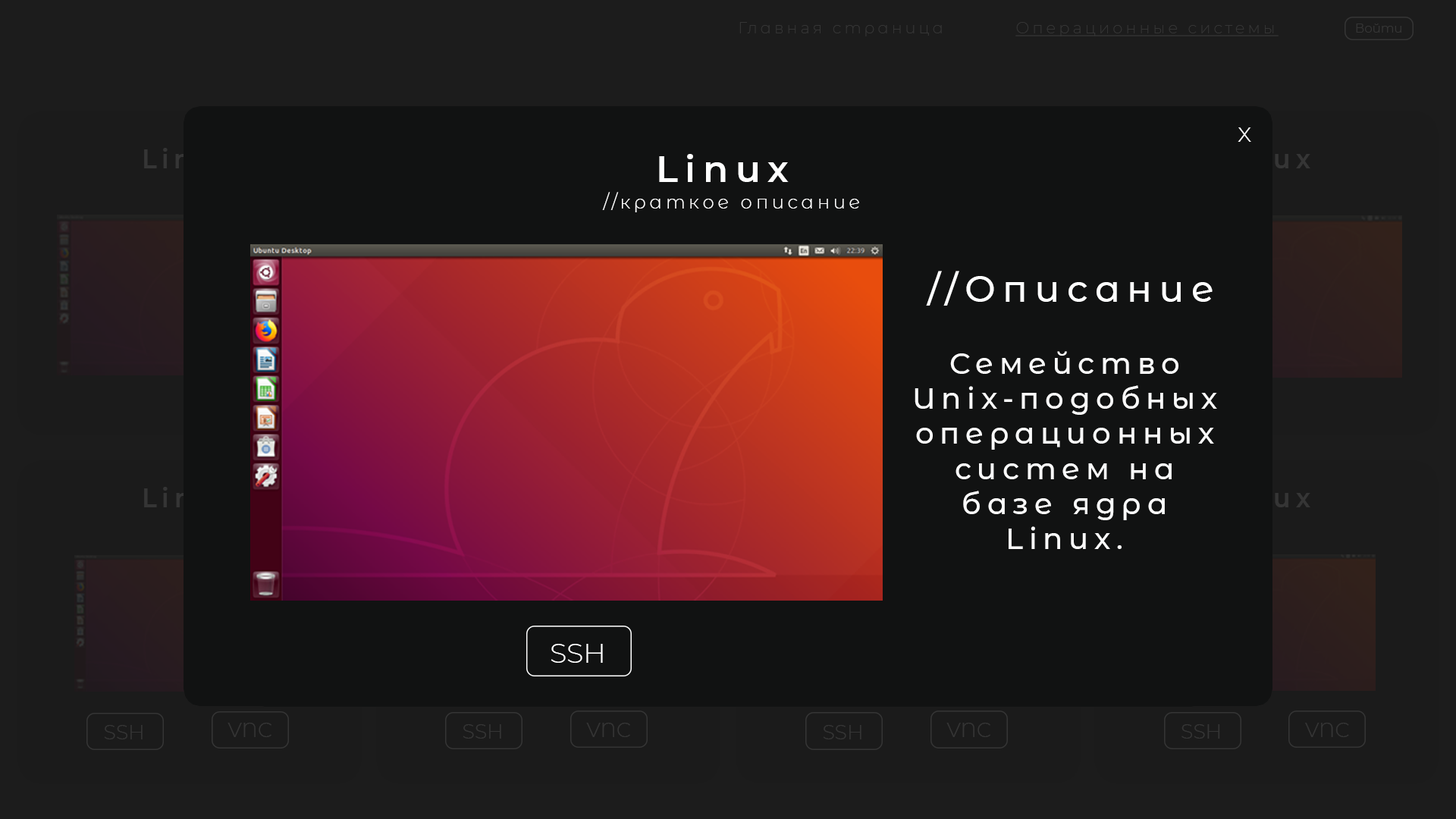
<style>
.page{position:relative;width:1456px;height:819px;background:#111212}
.page>*{position:absolute;margin:0}
.t1{font:15.8px "Montserrat-ExtraLight";letter-spacing:0.2em;color:#353535}
.t2{font:15.8px "Montserrat-ExtraLight";letter-spacing:0.2em;color:#353535;text-decoration:underline}
.t3{font:12.6px "Montserrat-Light";color:#353535}
.t4{font:27px "Montserrat-Light";letter-spacing:0.2em;color:#ffffff}
.t5{font:27px "Montserrat-SemiBold";letter-spacing:0.2em;scale:0.93 1}
.t6{font:36.6px "Montserrat-SemiBold";letter-spacing:0.2em;color:#ffffff}
.t7{font:18.3px "Montserrat-Light";letter-spacing:0.2em;color:#ffffff}
.t8{font:36.6px "Montserrat-Medium";letter-spacing:0.2em;color:#ffffff}
.t9{font:29.3px "Montserrat-Medium";letter-spacing:0.2em;color:#fbfbfb}
.t10{font:27.9px "Montserrat-Light";color:#ffffff}
.t11{font:20.3px "Montserrat-Light";color:#353535}
</style>
<div class="page">
<p class="t1" style="left:739px;top:22px;width:203px;height:14px">Главная страница</p>
<p class="t2" style="left:1015px;top:22px;width:264px;height:14px">Операционные системы</p>
<p class="t3" style="left:1356px;top:24px;width:45px;height:9px">Войти</p>
<p class="t4" style="left:1238px;top:127px;width:13px;height:15px">х</p>
<p class="t5" style="left:144px;top:148px;width:89px;height:20px">Linux</p>
<p class="t5" style="left:1221px;top:148px;width:89px;height:20px">Linux</p>
<p class="t6" style="left:659px;top:154px;width:130px;height:28px">Linux</p>
<p class="t7" style="left:602px;top:192px;width:257px;height:20px">//краткое описание</p>
<p class="t8" style="left:926px;top:271px;width:287px;height:35px">//Описание</p>
<p class="t9" style="left:915px;top:351px;width:302px;height:198px;text-align:center">Cемейство Unix-подобных операционных систем на базе ядра Linux.</p>
<p class="t5" style="left:144px;top:487px;width:89px;height:20px">Linux</p>
<p class="t5" style="left:1221px;top:487px;width:89px;height:20px">Linux</p>
<p class="t10" style="left:551px;top:644px;width:52px;height:19px">SSH</p>
<p class="t11" style="left:104px;top:725px;width:39px;height:14px">SSH</p>
<p class="t11" style="left:227px;top:723px;width:44px;height:14px">VNC</p>
<p class="t11" style="left:463px;top:724px;width:38px;height:15px">SSH</p>
<p class="t11" style="left:586px;top:723px;width:44px;height:14px">VNC</p>
<p class="t11" style="left:823px;top:725px;width:38px;height:14px">SSH</p>
<p class="t11" style="left:946px;top:723px;width:44px;height:14px">VNC</p>
<p class="t11" style="left:1181px;top:724px;width:39px;height:15px">SSH</p>
<p class="t11" style="left:1305px;top:723px;width:44px;height:14px">VNC</p>
</div>
